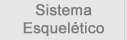
<style>
.page{position:relative;width:127px;height:40px;background:#e7e7e7}
.page>*{position:absolute;margin:0}
.t1{font:15px "ArialMT";color:#7c7c7c;font-weight:bold}
</style>
<div class="page">
<p class="t1" style="left:23px;top:4px;width:81px;height:33px;text-align:center">Sistema<br>Esquelético</p>
</div>
